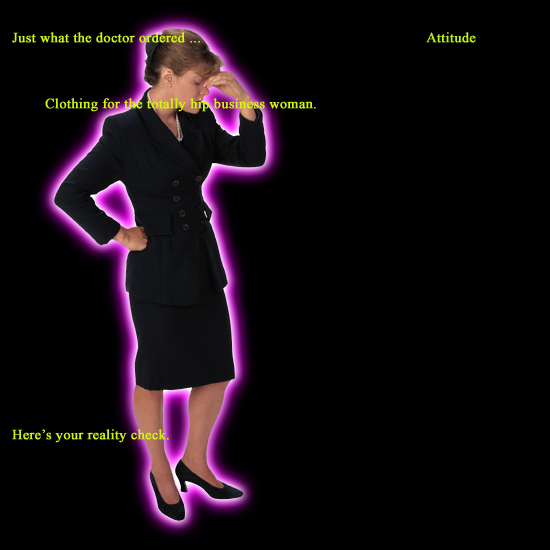
<style>
.page{position:relative;width:550px;height:550px;background:#000000}
.page>*{position:absolute;margin:0}
.t1{font:14px "TimesNewRomanPSMT";letter-spacing:0.01em;color:#d1f50c;font-weight:bold}
.t2{font:14px "TimesNewRomanPSMT";letter-spacing:0.01em;color:#c0f40b;font-weight:bold}
</style>
<div class="page">
<p class="t1" style="left:12px;top:32px;width:188px;height:11px">Just what the doctor ordered ...</p>
<p class="t2" style="left:426px;top:32px;width:50px;height:11px">Attitude</p>
<p class="t1" style="left:45px;top:98px;width:271px;height:14px">Clothing for the totally hip business woman.</p>
<p class="t1" style="left:12px;top:429px;width:157px;height:14px">Here’s your reality check.</p>
</div>
